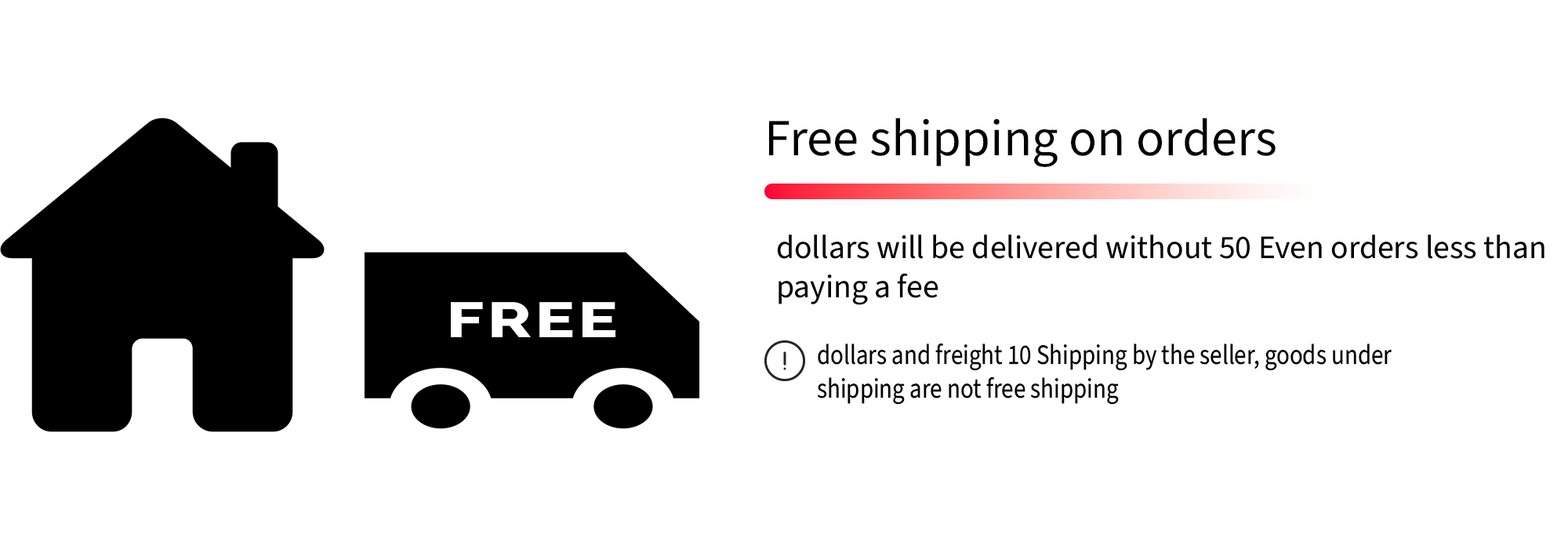
<style>
.page{position:relative;width:1568px;height:549px;background:#ffffff}
.page>*{position:absolute;margin:0}
.t1{font:52.3px "SourceSans3Roman-Regular";color:#000000}
.t2{font:32.7px "SourceSans3Roman-Regular";color:#000000}
.t3{font:28.1px "SourceSans3Roman-Regular";color:#000000;scale:0.87 1}
</style>
<div class="page">
<p class="t1" style="left:769px;top:118px;width:507px;height:49px">Free shipping on orders</p>
<p class="t2" style="left:777px;top:234px;width:767px;height:71px;text-align:right">Even orders less than 50 dollars will be delivered without paying a fee</p>
<p class="t3" style="left:817px;top:343px;width:575px;height:62px;text-align:right">Shipping by the seller, goods under 10 dollars and freight shipping are not free shipping</p>
</div>
